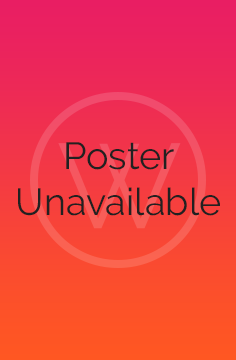
<style>
.page{position:relative;width:236px;height:360px}
.page>*{position:absolute;margin:0}
.t1{font:37.8px "Raleway-Regular";color:#212121}
</style>
<div class="page">
<p class="t1" style="left:18px;top:142px;width:202px;height:74px;text-align:center">Poster<br>Unavailable</p>
</div>
